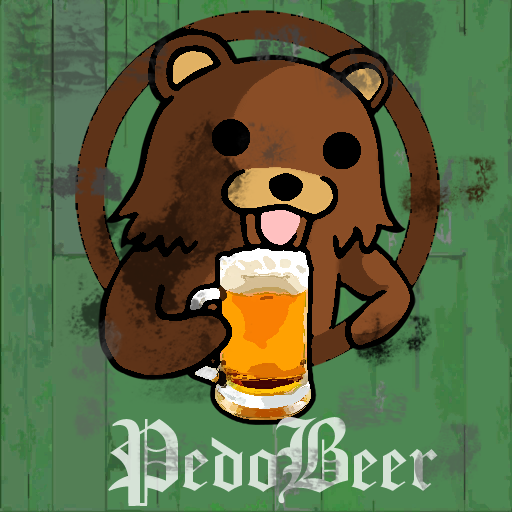
<style>
.page{position:relative;width:512px;height:512px}
.page>*{position:absolute;margin:0}
.t1{font:89px "OldLondonAlternate";color:#d6e3d7}
.t2{font:110px "OldLondonAlternate";color:#d6e3d7}
.t3{font:89px "OldLondonAlternate"}
.t4{font:110px "OldLondonAlternate"}
</style>
<div class="page">
<p class="t1" style="left:108px;top:419px;width:169px;height:87px"><span class="t2">P</span>edo</p>
<p class="t3" style="left:276px;top:417px;width:162px;height:86px"><span class="t4">B</span>eer</p>
</div>
